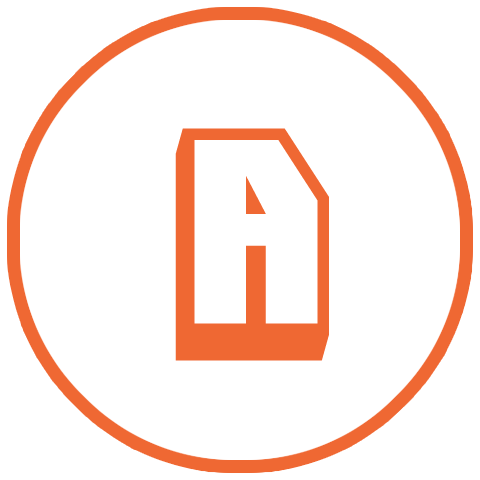
<style>
.page{position:relative;width:480px;height:480px;background:#ffffff}
.page>*{position:absolute;margin:0}
.t1{font:261.9px "DimitriSwank";color:#ef6833}
</style>
<div class="page">
<p class="t1" style="left:175px;top:128px;width:154px;height:233px">a</p>
</div>
